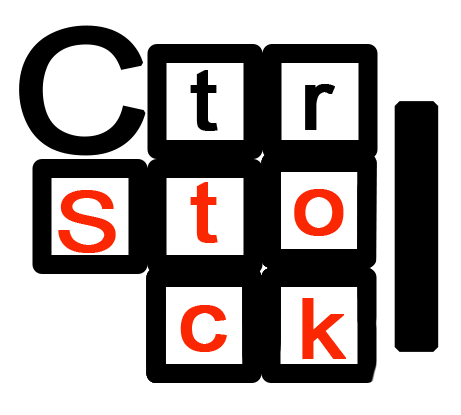
<style>
.page{position:relative;width:461px;height:415px;background:#ffffff}
.page>*{position:absolute;margin:0}
.t1{font:168px "ArialMT";letter-spacing:-0.05em;color:#000000;font-weight:bold;scale:1.14 1}
.t2{font:84px "ArialMT";letter-spacing:-0.05em;color:#000000;font-weight:bold;scale:1.14 1}
.t3{font:336px "ArialMT";letter-spacing:-0.05em;color:#000000;font-weight:bold;scale:1.14 1}
.t4{font:84px "ArialMT";letter-spacing:-0.05em;color:#fb2602;font-weight:bold;scale:1.14 1}
</style>
<div class="page">
<p class="t1" style="left:19px;top:25px;width:127px;height:131px">C</p>
<p class="t2" style="left:190px;top:70px;width:28px;height:61px">t</p>
<p class="t2" style="left:305px;top:84px;width:30px;height:46px">r</p>
<p class="t3" style="left:394px;top:101px;width:45px;height:251px">l</p>
<p class="t4" style="left:190px;top:182px;width:28px;height:61px">t</p>
<p class="t4" style="left:58px;top:190px;width:58px;height:63px">S</p>
<p class="t4" style="left:294px;top:189px;width:50px;height:47px">o</p>
<p class="t4" style="left:180px;top:305px;width:47px;height:47px">c</p>
<p class="t4" style="left:302px;top:298px;width:44px;height:61px">k</p>
</div>
